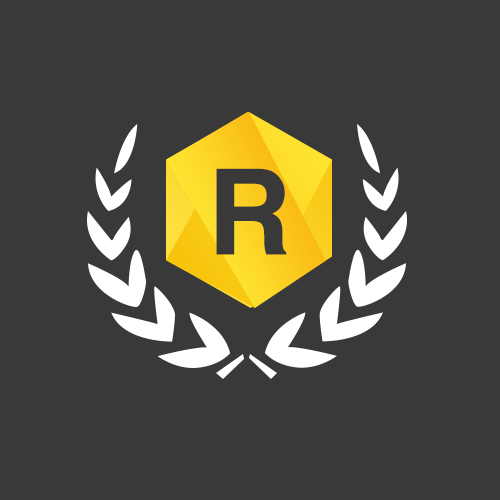
<style>
.page{position:relative;width:500px;height:500px;background:#393939}
.page>*{position:absolute;margin:0}
.t1{font:118.6px "Helvetica-Bold";letter-spacing:-0.02em;color:#393939;text-transform:uppercase;font-weight:bold}
</style>
<div class="page">
<p class="t1" style="left:216px;top:168px;width:71px;height:87px">r</p>
</div>
